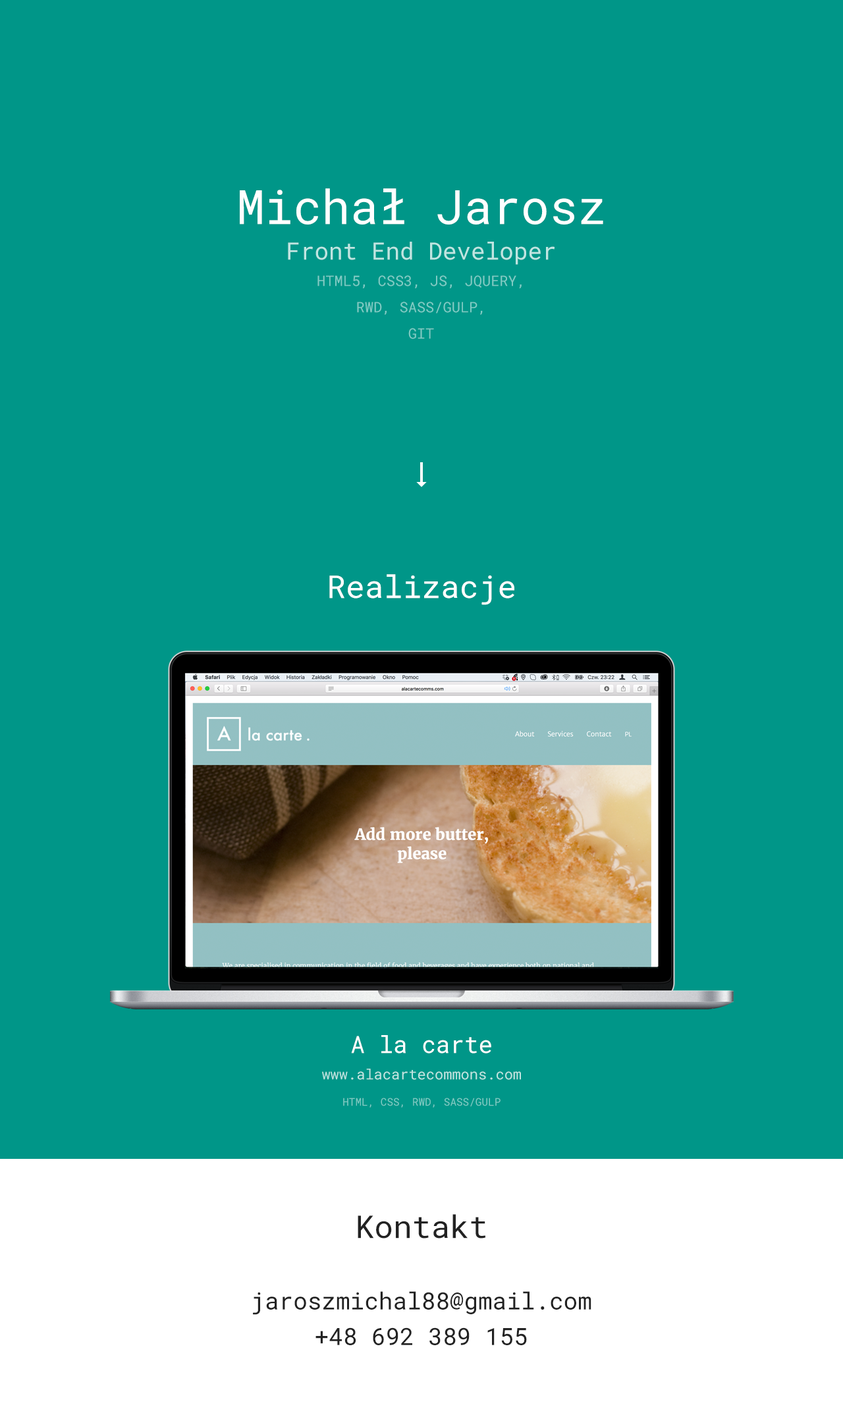
<style>
.page{position:relative;width:843px;height:1415px;background:#009688}
.page>*{position:absolute;margin:0}
.t1{font:14.5px/26.3px "RobotoMono-Regular";color:#80cbc4;text-transform:uppercase}
.t2{font:47.4px/11.9px "RobotoMono-Regular";color:#ffffff}
.t3{font:23.7px/35.6px "RobotoMono-Regular";color:#bfe5e1}
.t4{font:31.6px "RobotoMono-Regular";color:#ffffff}
.t5{font:10.5px/26.3px "RobotoMono-Regular";color:#80cbc4;text-transform:uppercase}
.t6{font:23.7px/35.6px "RobotoMono-Regular";color:#ffffff}
.t7{font:14.5px/26.3px "RobotoMono-Regular";color:#bfe5e1}
.t8{font:31.6px "RobotoMono-Regular";color:#222222}
.t9{font:23.7px/35.6px "RobotoMono-Regular";color:#222222}
</style>
<div class="page">
<p class="t1" style="left:240px;top:188px;width:363px;height:151px;text-align:center"><span class="t2">Michał Jarosz<br></span><span class="t3">Front End Developer<br></span>html5, css3, js, jquery,<br>RWD, sass/gulp,<br>git</p>
<p class="t4" style="left:329px;top:574px;width:185px;height:31px">Realizacje</p>
<p class="t5" style="left:322px;top:1035px;width:199px;height:72px;text-align:center"><span class="t6">A la carte<br></span><span class="t7">www.alacartecommons.com<br></span>HTML, CSS, RWD, sass/gulp</p>
<p class="t8" style="left:358px;top:1214px;width:128px;height:24px">Kontakt</p>
<p class="t9" style="left:253px;top:1291px;width:338px;height:54px;text-align:center">jaroszmichal88@gmail.com<br>+48 692 389 155</p>
</div>
